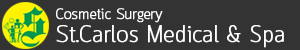
<style>
.page{position:relative;width:300px;height:50px;background:#333333}
.page>*{position:absolute;margin:0}
.t1{font:15px "Quark-Light";color:#ffffff;font-weight:bold}
.t2{font:23.3px "Quark-Light";color:#ffffff;font-weight:bold}
</style>
<div class="page">
<p class="t1" style="left:56px;top:8px;width:107px;height:15px">Cosmetic Surgery</p>
<p class="t2" style="left:56px;top:25px;width:228px;height:23px">St.Carlos Medical &amp; Spa</p>
</div>
